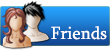
<style>
.page{position:relative;width:110px;height:50px}
.page>*{position:absolute;margin:0}
.t1{font:18px "Sylfaen";color:#ffffff}
</style>
<div class="page">
<p class="t1" style="left:51px;top:26px;width:56px;height:14px">Friends</p>
</div>
